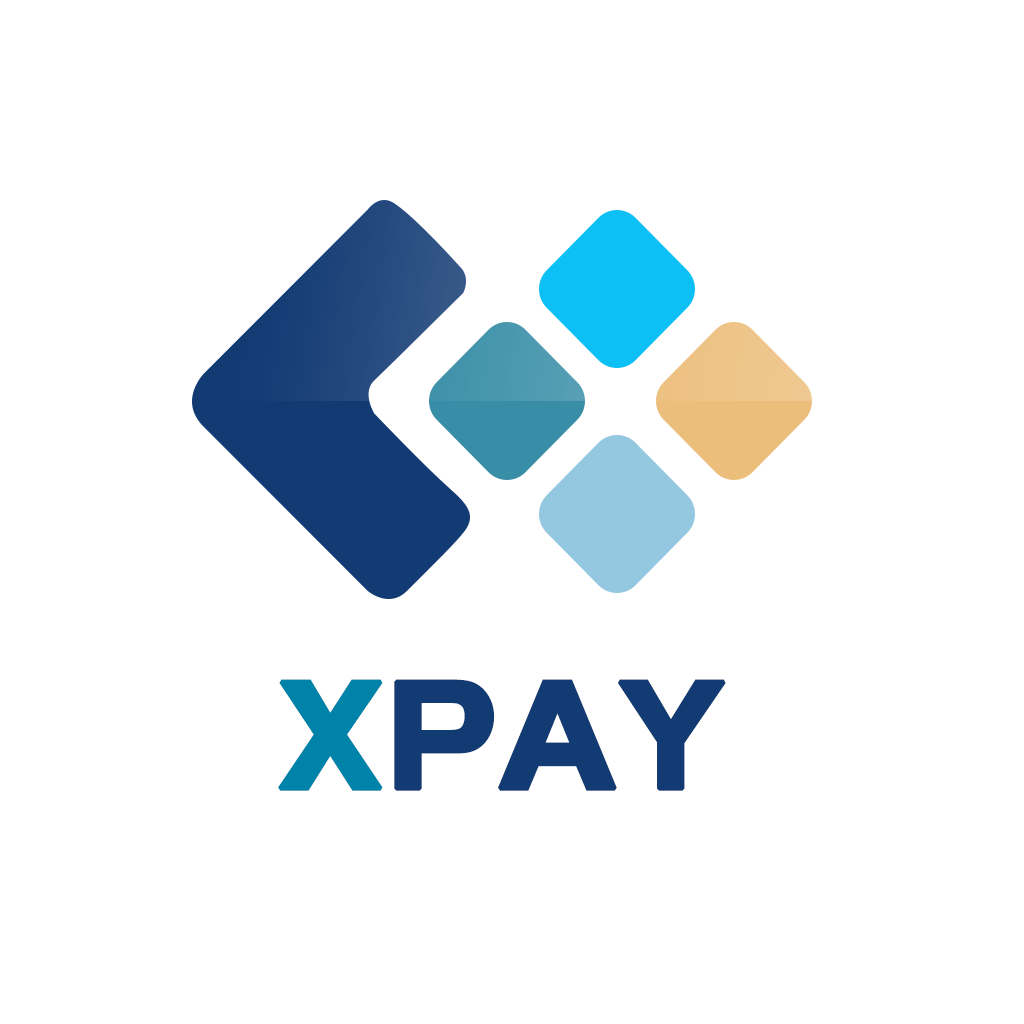
<style>
.page{position:relative;width:1024px;height:1024px;background:#ffffff}
.page>*{position:absolute;margin:0}
.t1{font:160px "PangMenZhengDao";color:#123a73;font-weight:bold}
.t2{font:160px "PangMenZhengDao";color:#0083a9;font-weight:bold}
</style>
<div class="page">
<p class="t1" style="left:278px;top:679px;width:448px;height:112px"><span class="t2">X</span>PAY</p>
</div>
